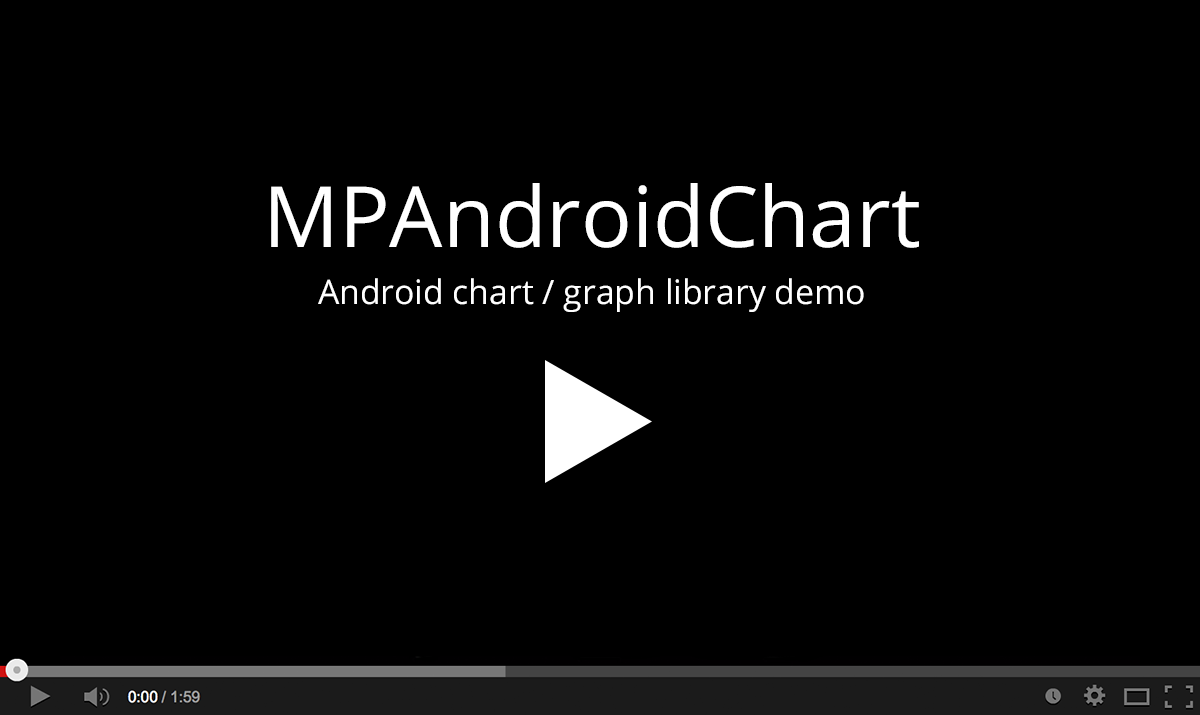
<style>
.page{position:relative;width:1200px;height:715px;background:#000000}
.page>*{position:absolute;margin:0}
.t1{font:33.7px/33.7px "OpenSans";color:#ffffff}
.t2{font:84.3px/33.7px "OpenSans";color:#ffffff}
</style>
<div class="page">
<p class="t1" style="left:271px;top:183px;width:648px;height:129px;text-align:center"><span class="t2">MPAndroidChart<br></span>Android chart / graph library demo</p>
</div>
